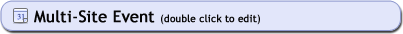
<style>
.page{position:relative;width:403px;height:34px;background:#e2e6fa}
.page>*{position:absolute;margin:0}
.t1{font:10px "TrebuchetMS";color:#070606;font-weight:bold}
.t2{font:16px "TrebuchetMS";color:#070606;font-weight:bold}
</style>
<div class="page">
<p class="t1" style="left:34px;top:10px;width:226px;height:15px"><span class="t2">Multi-Site Event </span>(double click to edit)</p>
</div>
